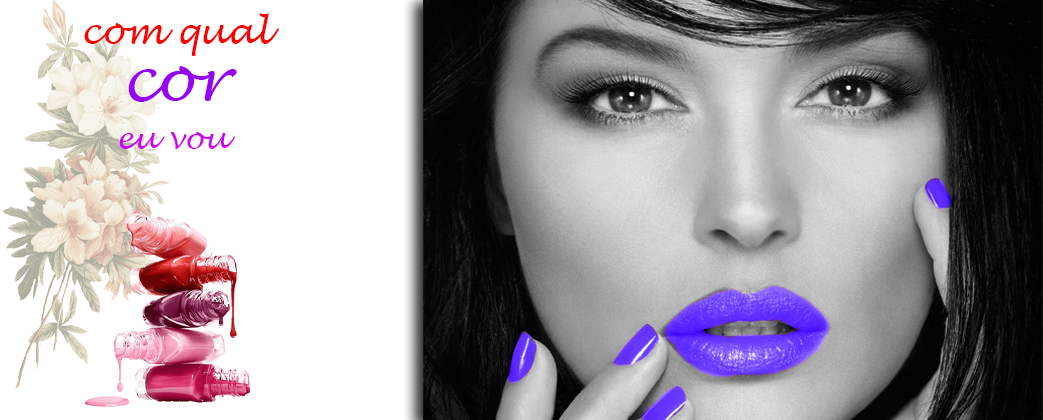
<style>
.page{position:relative;width:1043px;height:420px;background:#ffffff}
.page>*{position:absolute;margin:0}
.t1{font:36px "LucidaHandwriting-Italic";color:#ff0000}
.t2{font:60px "LucidaHandwriting-Italic";color:#9603f4}
.t3{font:30px "LucidaHandwriting-Italic";color:#cf03f4}
</style>
<div class="page">
<p class="t1" style="left:84px;top:13px;width:195px;height:43px">com qual</p>
<p class="t2" style="left:128px;top:66px;width:109px;height:36px">cor</p>
<p class="t3" style="left:119px;top:132px;width:117px;height:17px">eu vou</p>
</div>
